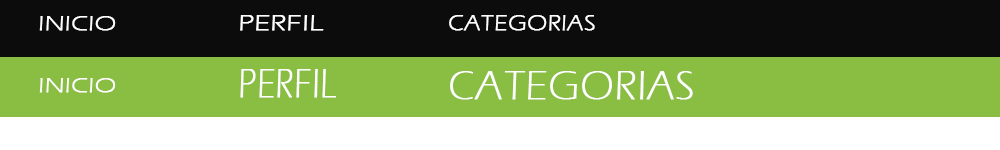
<style>
.page{position:relative;width:1000px;height:150px;background:#89be43}
.page>*{position:absolute;margin:0}
.t1{font:21.2px "ErasITC-Light";color:#ffffff;font-weight:bold;scale:1.27 1}
.t2{font:23.1px "ErasITC-Light";color:#ffffff;font-weight:bold;scale:1.29 1}
.t3{font:23.1px "ErasITC-Light";color:#ffffff;font-weight:bold;scale:1.1 1}
.t4{font:42.3px "ErasITC-Light";color:#ffffff;font-weight:bold;scale:0.81 1}
.t5{font:42.3px "ErasITC-Light";color:#ffffff;font-weight:bold}
</style>
<div class="page">
<p class="t1" style="left:39px;top:16px;width:77px;height:15px">INICIO</p>
<p class="t2" style="left:240px;top:15px;width:84px;height:16px">PERFIL</p>
<p class="t3" style="left:449px;top:15px;width:146px;height:16px">CATEGORIAS</p>
<p class="t1" style="left:39px;top:78px;width:77px;height:15px">INICIO</p>
<p class="t4" style="left:240px;top:69px;width:97px;height:29px">PERFIL</p>
<p class="t5" style="left:450px;top:71px;width:243px;height:29px">CATEGORIAS</p>
</div>
